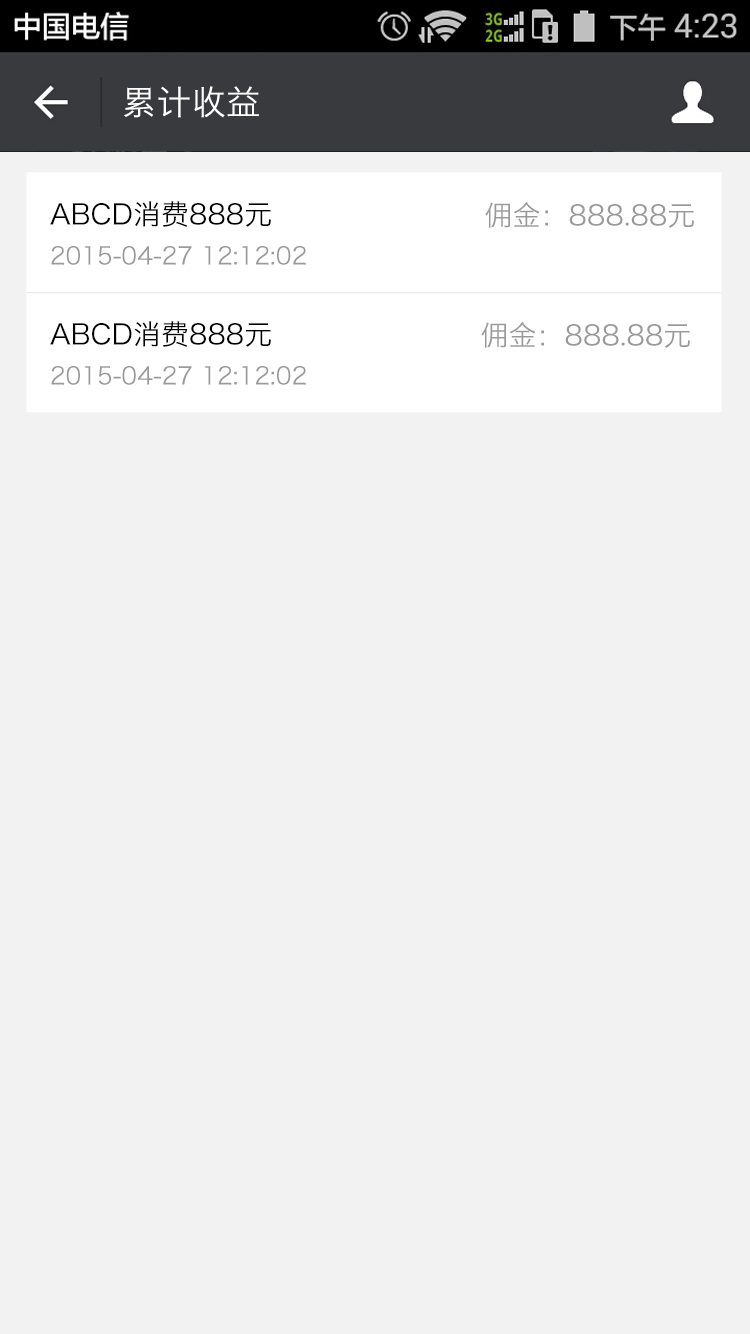
<style>
.page{position:relative;width:750px;height:1334px;background:#f2f2f2}
.page>*{position:absolute;margin:0}
.t1{font:34px "HiraginoSansGB-W3";letter-spacing:0.022em;color:#ffffff}
.t2{font:28px "HiraginoSansGB-W3";color:#000000}
.t3{font:28px "HiraginoSansGB-W3";color:#999999}
.t4{font:24px "HiraginoSansGB-W3";color:#999999}
</style>
<div class="page">
<p class="t1" style="left:124px;top:86px;width:135px;height:32px">累计收益</p>
<p class="t2" style="left:50px;top:201px;width:221px;height:26px">ABCD消费888元</p>
<p class="t3" style="left:485px;top:202px;width:209px;height:26px">佣金：888.88元</p>
<p class="t4" style="left:51px;top:246px;width:255px;height:19px">2015-04-27 12:12:02</p>
<p class="t2" style="left:50px;top:321px;width:221px;height:26px">ABCD消费888元</p>
<p class="t3" style="left:481px;top:322px;width:209px;height:26px">佣金：888.88元</p>
<p class="t4" style="left:51px;top:366px;width:255px;height:19px">2015-04-27 12:12:02</p>
</div>
